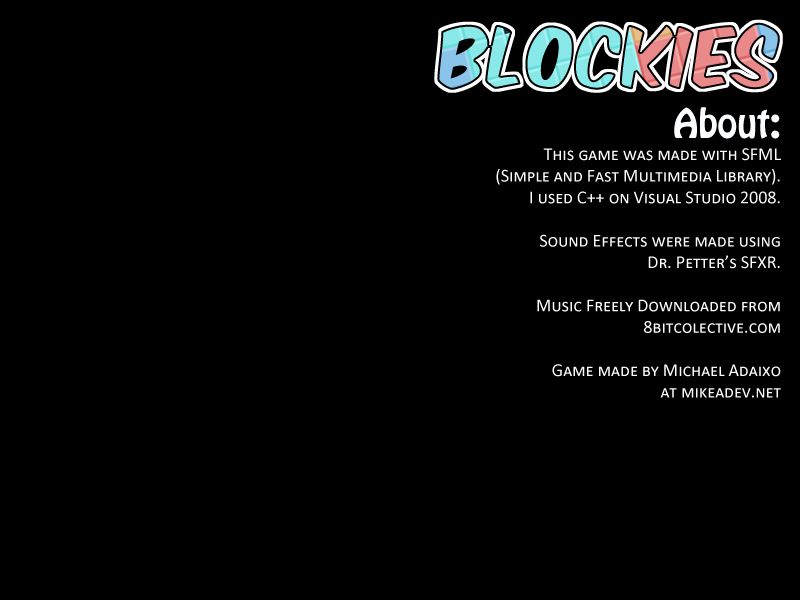
<style>
.page{position:relative;width:800px;height:600px;background:#000000}
.page>*{position:absolute;margin:0}
.t1{font:36px "HoboStd";color:#fbfdff}
.t2{font:18px "Calibri";color:#fbfdff;font-variant:small-caps}
</style>
<div class="page">
<p class="t1" style="left:674px;top:107px;width:106px;height:32px">About:</p>
<p class="t2" style="left:496px;top:148px;width:285px;height:250px;text-align:right">This game was made with SFML<br>(Simple and Fast Multimedia Library).<br>I used C++ on Visual Studio 2008.<br><br>Sound Effects were made using<br>Dr. Petter’s SFXR.<br><br>Music Freely Downloaded from<br>8bitcolective.com<br><br>Game made by Michael Adaixo<br>at mikeadev.net</p>
</div>
